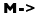
<style>
.page{position:relative;width:40px;height:20px;background:#ffffff}
.page>*{position:absolute;margin:0}
.t1{font:14px "GillSans-Bold";color:#030303;scale:1.1 1}
</style>
<div class="page">
<p class="t1" style="left:4px;top:3px;width:31px;height:10px">M-&gt;</p>
</div>
